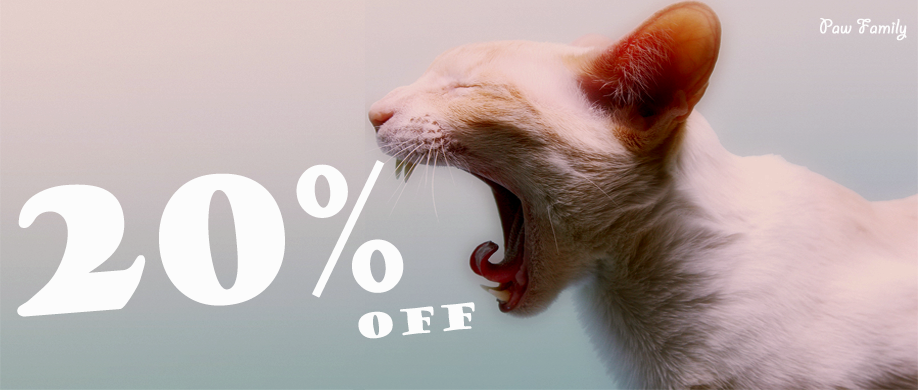
<style>
.page{position:relative;width:918px;height:390px}
.page>*{position:absolute;margin:0}
.t1{font:22.4px "GiddyupStd";color:#fcfcfc;font-weight:bold}
.t2{font:168px "GoudyStout";color:#fcfcfc;font-weight:bold}
.t3{font:33.6px "GoudyStout";color:#fcfcfc;font-weight:bold}
</style>
<div class="page">
<p class="t1" style="left:820px;top:18px;width:87px;height:23px">Paw Family</p>
<p class="t2" style="left:17px;top:160px;width:387px;height:157px;rotate:-4deg">20%</p>
<p class="t3" style="left:358px;top:302px;width:117px;height:37px;rotate:-6deg">OFF</p>
</div>
